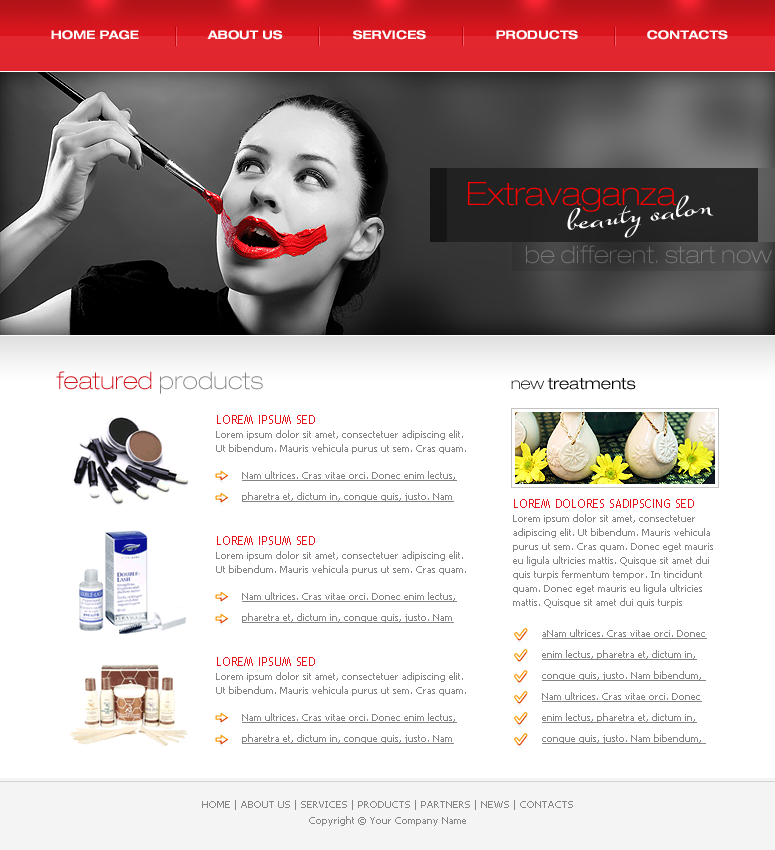
<style>
.page{position:relative;width:775px;height:850px;background:#ffffff}
.page>*{position:absolute;margin:0}
.t1{font:12px "HelveticaNeueLTPro-BdEx";color:#ffffff}
.t2{font:32.2px "HelveticaNeueLTPro-ThEx";color:#f80000}
.t3{font:32.2px "SuaveScriptAlt-Bold";color:#ffffff}
.t4{font:24px "HelveticaNeueLTPro-ThEx";color:#717171}
.t5{font:24px "HelveticaNeueLTPro-ThEx";color:#cf151c}
.t6{font:24px "HelveticaNeueLTPro-ThEx";color:#858585}
.t7{font:16px "HelveticaNeueLTPro-LtEx";color:#000000}
.t8{font:16px "HelveticaNeueLTPro-ThEx";color:#000000}
.t9{font:10px/14px "Tahoma";color:#858585}
.t10{font:12px/12px "TrebuchetMS";color:#e3151d;text-transform:uppercase}
.t11{font:10px/21px "Tahoma";color:#858585;text-decoration:underline}
.t12{font:10px/16px "Tahoma";color:#858585}
</style>
<div class="page">
<p class="t1" style="left:51px;top:30px;width:88px;height:10px">HOME PAGE</p>
<p class="t1" style="left:207px;top:30px;width:76px;height:10px">ABOUT US</p>
<p class="t1" style="left:353px;top:30px;width:73px;height:10px">SERVICES</p>
<p class="t1" style="left:496px;top:30px;width:82px;height:10px">PRODUCTS</p>
<p class="t1" style="left:647px;top:30px;width:81px;height:10px">CONTACTS</p>
<p class="t2" style="left:468px;top:182px;width:209px;height:30px">Extravaganza</p>
<p class="t3" style="left:567px;top:195px;width:147px;height:43px;rotate:-7deg">beauty salon</p>
<p class="t4" style="left:526px;top:245px;width:246px;height:19px">be different. start now</p>
<p class="t5" style="left:56px;top:371px;width:207px;height:23px">featured <span class="t6">products</span></p>
<p class="t7" style="left:511px;top:378px;width:125px;height:12px"><span class="t8">new </span>treatments</p>
<p class="t9" style="left:216px;top:415px;width:250px;height:39px"><span class="t10">LOREM IPSUM sed <br></span>Lorem ipsum dolor sit amet, consectetuer adipiscing elit. Ut bibendum. Mauris vehicula purus ut sem. Cras quam.</p>
<p class="t11" style="left:242px;top:471px;width:215px;height:31px">Nam ultrices. Cras vitae orci. Donec enim lectus, pharetra et, dictum in, congue quis, justo. Nam</p>
<p class="t9" style="left:513px;top:499px;width:200px;height:109px"><span class="t10">LOREM DOLORES SADIPSCING sed <br></span>Lorem ipsum dolor sit amet, consectetuer adipiscing elit. Ut bibendum. Mauris vehicula purus ut sem. Cras quam. Donec eget mauris eu ligula ultricies mattis. Quisque sit amet dui quis turpis fermentum tempor. In tincidunt quam. Donec eget mauris eu ligula ultricies mattis. Quisque sit amet dui quis turpis</p>
<p class="t9" style="left:216px;top:536px;width:250px;height:39px"><span class="t10">LOREM IPSUM sed <br></span>Lorem ipsum dolor sit amet, consectetuer adipiscing elit. Ut bibendum. Mauris vehicula purus ut sem. Cras quam.</p>
<p class="t11" style="left:242px;top:592px;width:215px;height:31px">Nam ultrices. Cras vitae orci. Donec enim lectus, pharetra et, dictum in, congue quis, justo. Nam</p>
<p class="t11" style="left:542px;top:629px;width:165px;height:115px">aNam ultrices. Cras vitae orci. Donec enim lectus, pharetra et, dictum in, congue quis, justo. Nam bibendum, <br>Nam ultrices. Cras vitae orci. Donec enim lectus, pharetra et, dictum in, congue quis, justo. Nam bibendum,</p>
<p class="t9" style="left:216px;top:657px;width:250px;height:39px"><span class="t10">LOREM IPSUM sed <br></span>Lorem ipsum dolor sit amet, consectetuer adipiscing elit. Ut bibendum. Mauris vehicula purus ut sem. Cras quam.</p>
<p class="t11" style="left:242px;top:713px;width:215px;height:31px">Nam ultrices. Cras vitae orci. Donec enim lectus, pharetra et, dictum in, congue quis, justo. Nam</p>
<p class="t12" style="left:202px;top:800px;width:371px;height:26px;text-align:center">HOME | ABOUT US | SERVICES | PRODUCTS | PARTNERS | NEWS | CONTACTS<br>Copyright © Your Company Name</p>
</div>
